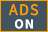
<style>
.page{position:relative;width:48px;height:32px;background:#415561}
.page>*{position:absolute;margin:0}
.t1{font:16px "SourceSansRoman-Regular";letter-spacing:0.08em;color:#ff9c00}
.t2{font:14px "SourceSansRoman-Bold";letter-spacing:0.08em;color:#ffffff}
</style>
<div class="page">
<p class="t1" style="left:9px;top:4px;width:29px;height:12px">ADS</p>
<p class="t2" style="left:15px;top:19px;width:18px;height:10px">ON</p>
</div>
